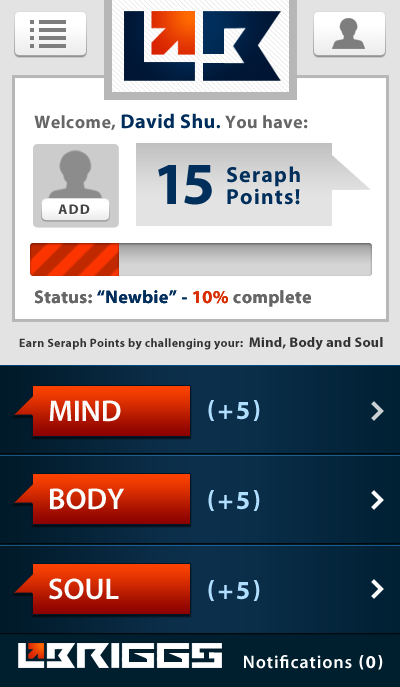
<style>
.page{position:relative;width:400px;height:687px}
.page>*{position:absolute;margin:0}
.t1{font:20px "MyriadPro-Bold";letter-spacing:0.025em;color:#002e5c}
.t2{font:18px "MyriadPro-Bold";letter-spacing:0.025em;color:#666666}
.t3{font:18px "MyriadPro-Bold";letter-spacing:0.025em;color:#002e5c}
.t4{font:60px "MyriadPro-Bold";letter-spacing:-0.075em;color:#002f5c}
.t5{font:22px/22px "MyriadPro-Bold";letter-spacing:0.05em;color:#002f5c}
.t6{font:14px "MyriadPro-Bold";letter-spacing:0.1em;color:#444444;text-transform:uppercase}
.t7{font:18px "MyriadPro-Bold";letter-spacing:0.025em;color:#d82d01}
.t8{font:12px "MyriadPro-Bold";letter-spacing:0.025em;color:#333333}
.t9{font:14px "MyriadPro-Bold";letter-spacing:0.025em;color:#333333}
.t10{font:30px "MyriadPro-Semibold";color:#fcfcfc}
.t11{font:26px "MyriadPro-Bold";letter-spacing:0.1em;color:#b0deff;text-transform:uppercase}
.t12{font:18px "MyriadPro-Semibold";letter-spacing:0.05em;color:#ffffff}
.t13{font:18px "MyriadPro-Bold";letter-spacing:0.1em;color:#ffffff;text-transform:uppercase}
</style>
<div class="page">
<p class="t1" style="left:34px;top:113px;width:274px;height:17px"><span class="t2">Welcome, </span>David Shu<span class="t3">. </span><span class="t2">You have:</span></p>
<p class="t4" style="left:158px;top:165px;width:54px;height:40px">15</p>
<p class="t5" style="left:227px;top:166px;width:73px;height:39px">Seraph<br>Points!</p>
<p class="t6" style="left:58px;top:204px;width:32px;height:10px">ADD</p>
<p class="t3" style="left:34px;top:290px;width:277px;height:17px"><span class="t2">Status:</span> “Newbie” - <span class="t7">10%</span><span class="t2"> complete</span></p>
<p class="t3" style="left:34px;top:290px;width:277px;height:17px"><span class="t2">Status:</span> “Newbie” - <span class="t7">10%</span><span class="t2"> complete</span></p>
<p class="t8" style="left:19px;top:337px;width:364px;height:13px">Earn Seraph Points by challenging your:  <span class="t9">Mind, Body and Soul</span></p>
<p class="t10" style="left:49px;top:400px;width:72px;height:22px">MIND</p>
<p class="t11" style="left:208px;top:400px;width:52px;height:21px">(+5)</p>
<p class="t10" style="left:50px;top:488px;width:75px;height:22px">BODY</p>
<p class="t11" style="left:208px;top:490px;width:52px;height:21px">(+5)</p>
<p class="t10" style="left:49px;top:578px;width:70px;height:22px">SOUL</p>
<p class="t11" style="left:208px;top:580px;width:52px;height:21px">(+5)</p>
<p class="t12" style="left:244px;top:655px;width:139px;height:15px">Notifications<span class="t13"> (0)</span></p>
</div>
